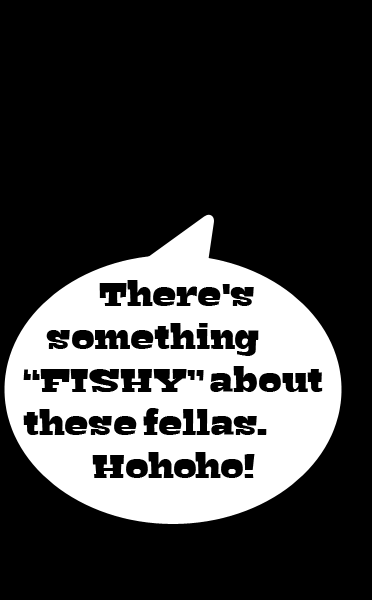
<style>
.page{position:relative;width:372px;height:600px;background:#000000}
.page>*{position:absolute;margin:0}
.t1{font:36px "Bigfish-Black";color:#000000}
.t2{font:36px "ComicSansMS";color:#000000}
</style>
<div class="page">
<p class="t1" style="left:23px;top:280px;width:300px;height:198px"><span class="t2">      </span>  There's<br>    something “FISHY” about  these fellas. <br>            Hohoho!</p>
</div>
